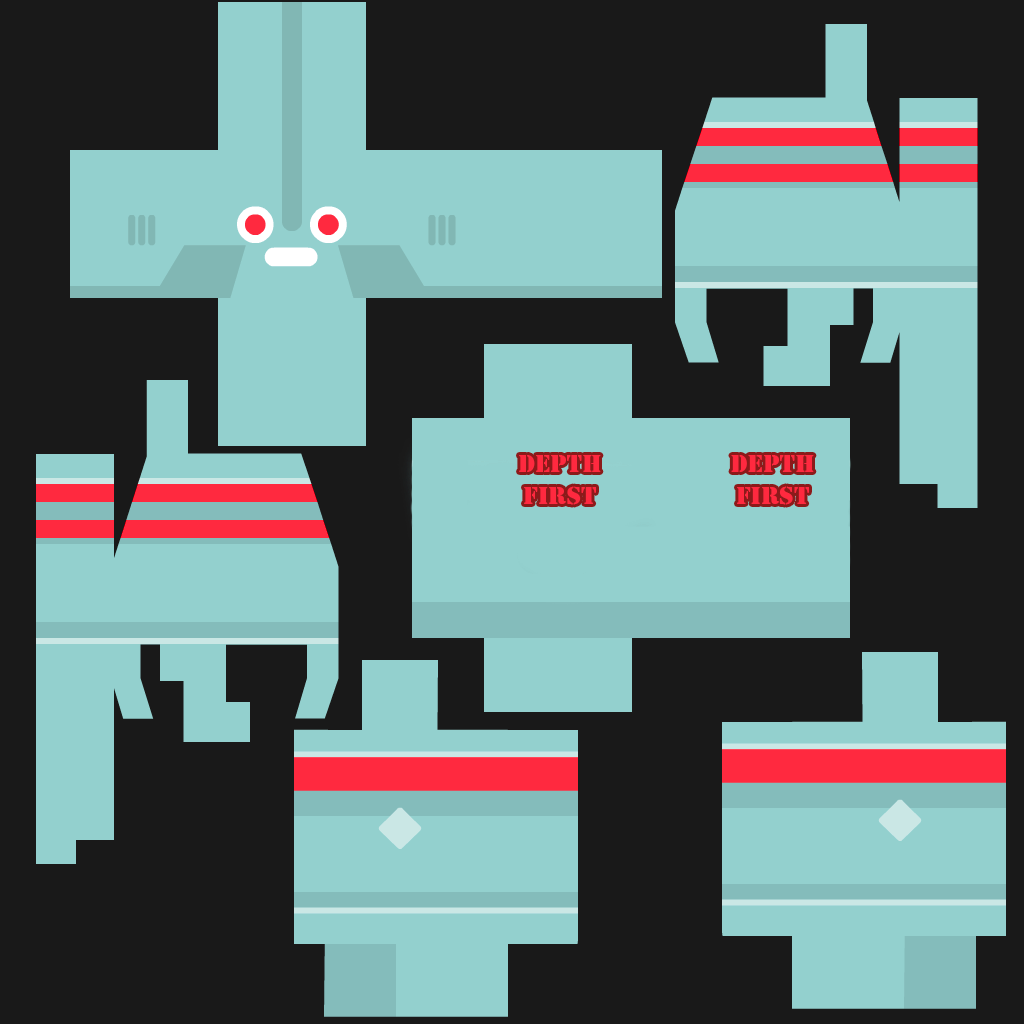
<style>
.page{position:relative;width:1024px;height:1024px;background:#191919}
.page>*{position:absolute;margin:0}
.t1{font:26px "Stencil";color:#ff293f}
</style>
<div class="page">
<p class="t1" style="left:519px;top:455px;width:82px;height:50px;text-align:center">DEPTH<br>FIRST</p>
<p class="t1" style="left:731px;top:455px;width:83px;height:50px;text-align:center">DEPTH<br>First</p>
</div>
